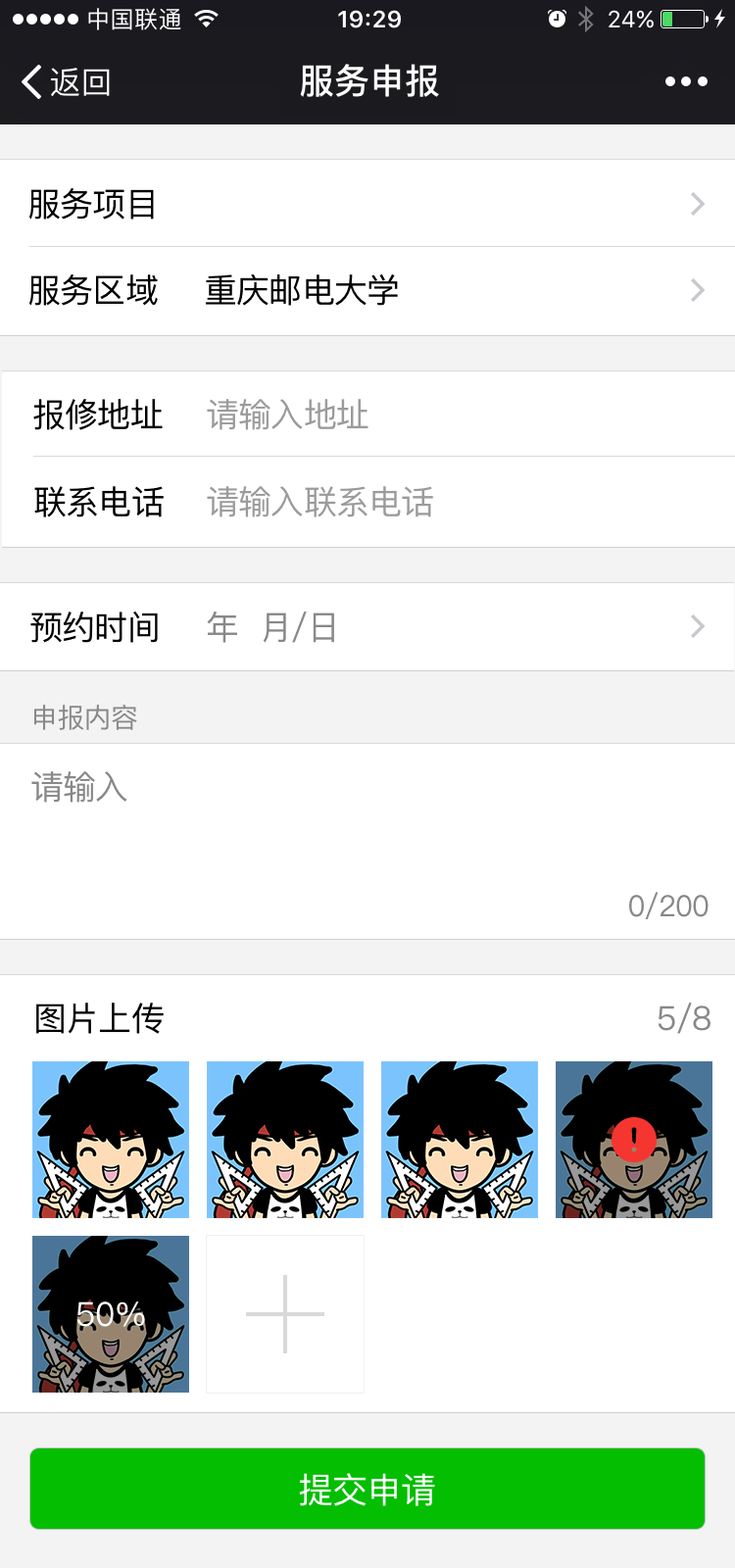
<style>
.page{position:relative;width:735px;height:1568px;background:#ffffff}
.page>*{position:absolute;margin:0}
.t1{font:35.3px "PingFangSC-Medium";color:#ffffff}
.t2{font:33.3px "PingFangSC-Regular";letter-spacing:-0.026em;color:#000000}
.t3{font:33.3px "PingFangSC-Regular";letter-spacing:-0.026em;color:#9b9b9b}
.t4{font:33.3px "PingFangSC-Regular";letter-spacing:-0.026em;color:#888888}
.t5{font:27.4px "PingFangSC-Regular";letter-spacing:-0.026em;color:#888888}
.t6{font:29.4px "PingFangSC-Regular";letter-spacing:-0.026em;color:#888888}
.t7{font:33.3px "PingFangSC-Regular";letter-spacing:-0.026em;color:#ffffff}
.t8{font:35.3px "PingFangSC-Regular";letter-spacing:-0.026em;color:#ffffff}
</style>
<div class="page">
<p class="t1" style="left:300px;top:64px;width:139px;height:33px">服务申报</p>
<p class="t2" style="left:29px;top:188px;width:125px;height:32px">服务项目</p>
<p class="t2" style="left:29px;top:274px;width:129px;height:32px">服务区域</p>
<p class="t2" style="left:206px;top:274px;width:192px;height:32px">重庆邮电大学</p>
<p class="t2" style="left:33px;top:399px;width:130px;height:31px">报修地址</p>
<p class="t3" style="left:207px;top:399px;width:161px;height:31px">请输入地址</p>
<p class="t2" style="left:34px;top:486px;width:130px;height:31px">联系电话</p>
<p class="t3" style="left:207px;top:486px;width:226px;height:31px">请输入联系电话</p>
<p class="t2" style="left:30px;top:612px;width:128px;height:31px">预约时间</p>
<p class="t4" style="left:207px;top:612px;width:127px;height:31px">年  月/日</p>
<p class="t5" style="left:34px;top:705px;width:103px;height:25px">申报内容</p>
<p class="t4" style="left:31px;top:771px;width:96px;height:32px">请输入</p>
<p class="t6" style="left:629px;top:892px;width:80px;height:27px">0/200</p>
<p class="t2" style="left:36px;top:1003px;width:128px;height:31px">图片上传</p>
<p class="t4" style="left:658px;top:1003px;width:52px;height:31px">5/8</p>
<p class="t7" style="left:76px;top:1301px;width:69px;height:26px">50%</p>
<p class="t8" style="left:299px;top:1473px;width:136px;height:33px">提交申请</p>
</div>
